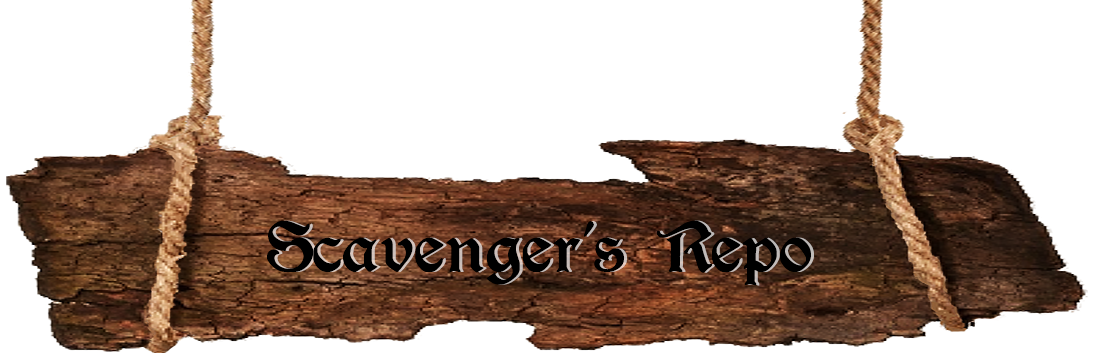
<style>
.page{position:relative;width:1097px;height:357px;background:#ffffff}
.page>*{position:absolute;margin:0}
.t1{font:80px "Augusta-Regular";color:#000000}
</style>
<div class="page">
<p class="t1" style="left:267px;top:220px;width:544px;height:66px">Scavenger’s Repo</p>
</div>
